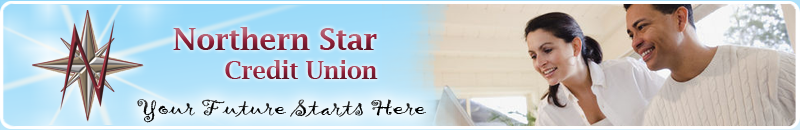
<style>
.page{position:relative;width:800px;height:130px}
.page>*{position:absolute;margin:0}
.t1{font:29.7px "LucidaBright-Demi"}
.t2{font:23.8px "LucidaBright-Demi"}
.t3{font:22.4px "Gigi-Regular";color:#000000;scale:1.32 1}
</style>
<div class="page">
<p class="t1" style="left:173px;top:27px;width:205px;height:52px;text-align:right">Northern Star<br><span class="t2">Credit Union</span></p>
<p class="t3" style="left:137px;top:99px;width:289px;height:24px">Your Future Starts Here</p>
</div>
